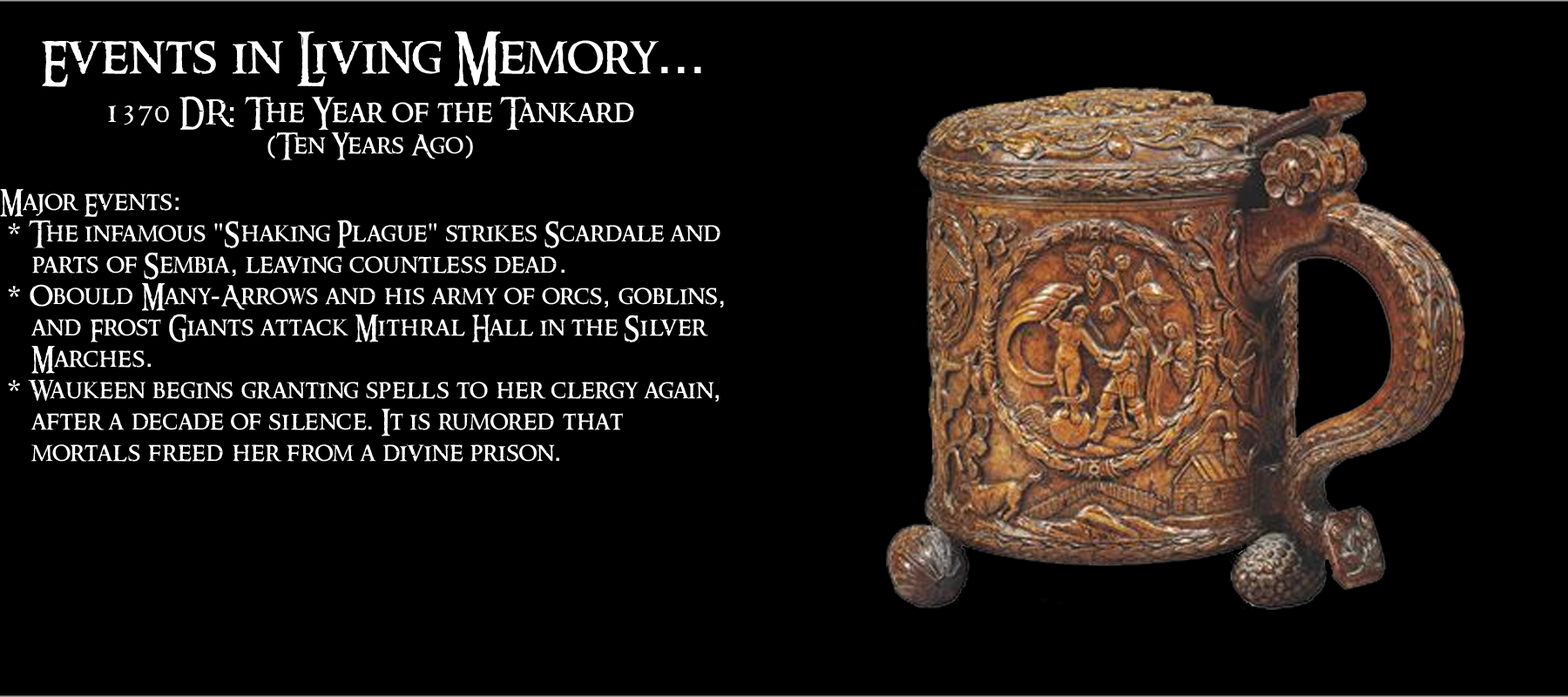
<style>
.page{position:relative;width:1568px;height:697px;background:#000000}
.page>*{position:absolute;margin:0}
.t1{font:26.1px "RingbearerMedium";letter-spacing:0.025em;color:#ffffff}
.t2{font:15.7px "RingbearerMedium";letter-spacing:0.025em;color:#ffffff}
.t3{font:52.3px "RingbearerMedium";letter-spacing:0.025em;color:#ffffff}
.t4{font:52.3px "Rockwell";letter-spacing:0.025em;color:#ffffff}
.t5{font:31.4px "RingbearerMedium";letter-spacing:0.025em;color:#ffffff}
.t6{font:31.4px "Rockwell";letter-spacing:0.025em;color:#ffffff}
.t7{font:26.1px "Rockwell";letter-spacing:0.025em;color:#ffffff}
</style>
<div class="page">
<p class="t1" style="left:0px;top:31px;width:724px;height:431px;text-align:center"><span class="t2"><br></span><span class="t3">Events in Living Memory</span><span class="t4">...<br><br></span><span class="t5">1370 DR</span><span class="t6">:</span><span class="t5"> The Year of the Tankard<br></span><span class="t7">(</span>Ten Years Ago<span class="t7">)<br><br></span>Major Events<span class="t7">:<br> * </span>The infamous <span class="t7">"</span>Shaking Plague<span class="t7">"</span> strikes Scardale and <br> parts of Sembia<span class="t7">,</span> leaving countless dead<span class="t7">.<br> * </span>Obould Many<span class="t7">-</span>Arrows and his army of orcs<span class="t7">,</span> goblins<span class="t7">,</span> <br> and Frost Giants attack Mithral Hall in the Silver <br> Marches<span class="t7">.<br> * </span>Waukeen begins granting spells to her clergy again<span class="t7">,</span> <br> after a decade of silence<span class="t7">.</span> It is rumored that <br> mortals freed her from a divine prison<span class="t7">.</span></p>
</div>
